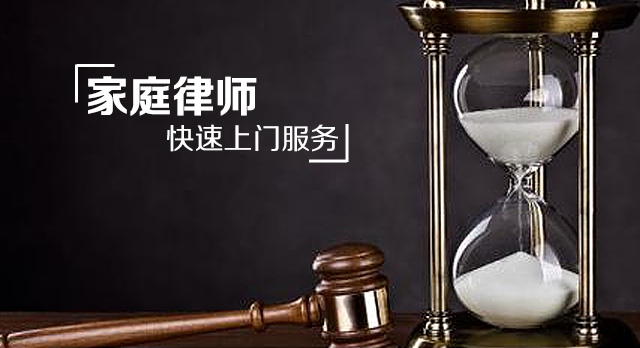
<style>
.page{position:relative;width:640px;height:348px}
.page>*{position:absolute;margin:0}
.t1{font:43.1px "FZZCHJW--GB1-0";color:#fffefe}
.t2{font:28.9px "FZZHJW--GB1-0";color:#fffefe}
</style>
<div class="page">
<p class="t1" style="left:88px;top:76px;width:169px;height:40px">家庭律师</p>
<p class="t2" style="left:167px;top:124px;width:171px;height:28px">快速上门服务</p>
</div>
